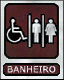
<style>
.page{position:relative;width:64px;height:80px}
.page>*{position:absolute;margin:0}
.t1{font:8.6px "Verdana";letter-spacing:0.02em}
</style>
<div class="page">
<p class="t1" style="left:7px;top:66px;width:49px;height:7px">BANHEIRO</p>
</div>
